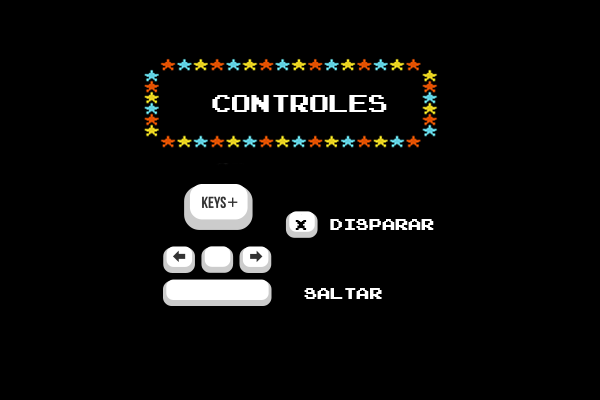
<style>
.page{position:relative;width:600px;height:400px;background:#000000}
.page>*{position:absolute;margin:0}
.t1{font:20px "ArcadeNormal";color:#ffffff}
.t2{font:12.1px "ArcadeNormal";color:#000000}
.t3{font:13.3px "ArcadeNormal";color:#ffffff}
</style>
<div class="page">
<p class="t1" style="left:212px;top:95px;width:175px;height:17px">CONTROLES</p>
<p class="t2" style="left:295px;top:220px;width:12px;height:10px">X</p>
<p class="t3" style="left:330px;top:219px;width:104px;height:11px">dISPARAR</p>
<p class="t3" style="left:304px;top:288px;width:78px;height:11px">saltar</p>
</div>
